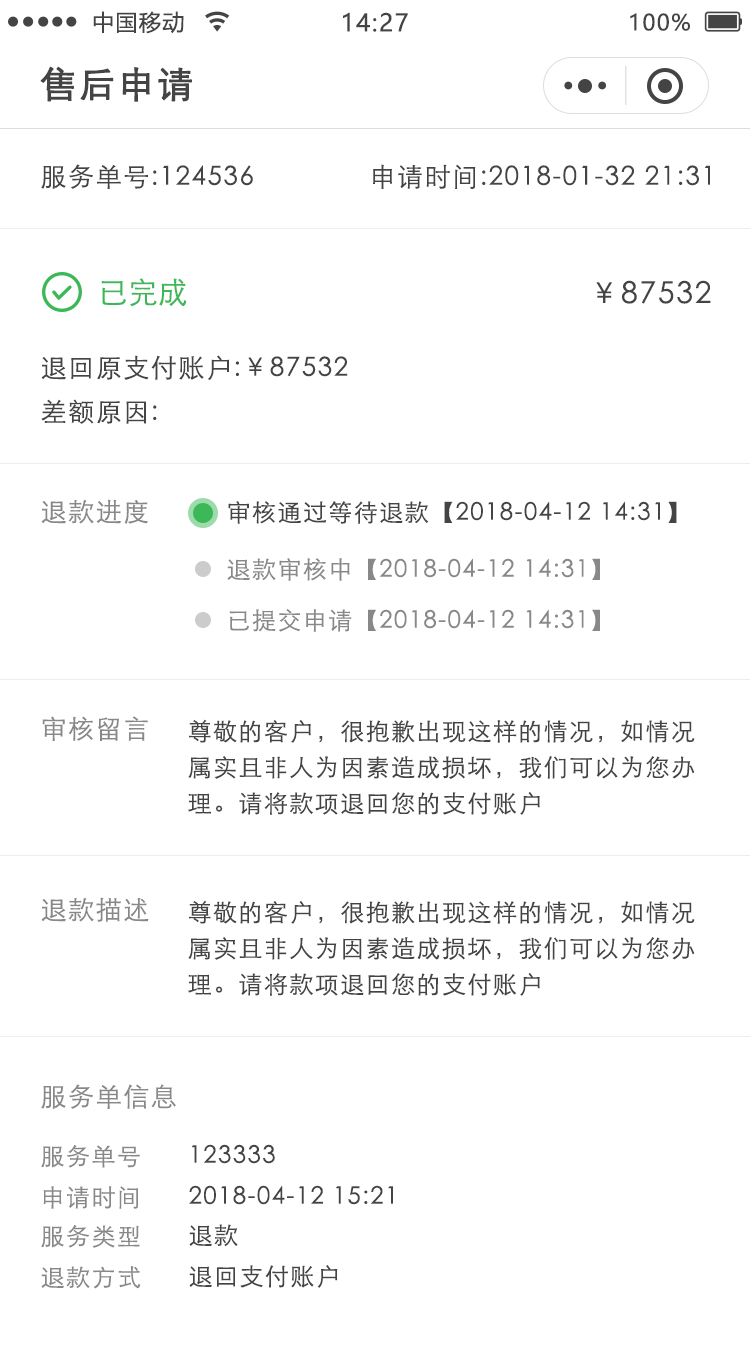
<style>
.page{position:relative;width:750px;height:1347px;background:#ffffff}
.page>*{position:absolute;margin:0}
.t1{font:22px "MicrosoftYaHei";letter-spacing:0.06em;color:#444444}
.t2{font:24px "MicrosoftYaHei";letter-spacing:0.06em;color:#444444}
.t3{font:36px "STXihei";letter-spacing:0.06em;color:#444444;font-weight:bold}
.t4{font:26px "STXihei";letter-spacing:0.06em;color:#444444}
.t5{font:30px "STXihei";color:#3db858}
.t6{font:30px "STXihei";letter-spacing:0.06em;color:#444444}
.t7{font:26px "STXihei";letter-spacing:0.06em;color:#888888}
.t8{font:24px "STXihei";letter-spacing:0.06em;color:#444444}
.t9{font:24px "STXihei";letter-spacing:0.06em;color:#888888}
.t10{font:24px/36px "STXihei";letter-spacing:0.06em;color:#444444}
</style>
<div class="page">
<p class="t1" style="left:93px;top:11px;width:91px;height:23px">中国移动</p>
<p class="t2" style="left:343px;top:12px;width:65px;height:20px">14:27</p>
<p class="t1" style="left:630px;top:13px;width:60px;height:18px">100%</p>
<p class="t3" style="left:40px;top:66px;width:152px;height:36px">售后申请</p>
<p class="t4" style="left:41px;top:164px;width:212px;height:25px">服务单号:124536</p>
<p class="t4" style="left:373px;top:164px;width:337px;height:25px">申请时间:2018-01-32 21:31</p>
<p class="t5" style="left:101px;top:278px;width:86px;height:29px">已完成</p>
<p class="t6" style="left:596px;top:280px;width:115px;height:24px">￥87532</p>
<p class="t4" style="left:41px;top:355px;width:307px;height:25px">退回原支付账户:￥87532</p>
<p class="t4" style="left:41px;top:399px;width:116px;height:25px">差额原因:</p>
<p class="t7" style="left:41px;top:499px;width:107px;height:25px">退款进度</p>
<p class="t8" style="left:228px;top:501px;width:449px;height:23px">审核通过等待退款【2018-04-12 14:31】</p>
<p class="t9" style="left:227px;top:558px;width:373px;height:23px">退款审核中【2018-04-12 14:31】</p>
<p class="t9" style="left:229px;top:609px;width:371px;height:23px">已提交申请【2018-04-12 14:31】</p>
<p class="t7" style="left:42px;top:716px;width:106px;height:25px">审核留言</p>
<p class="t10" style="left:188px;top:719px;width:507px;height:96px">尊敬的客户，很抱歉出现这样的情况，如情况<br>属实且非人为因素造成损坏，我们可以为您办<br>理。请将款项退回您的支付账户</p>
<p class="t7" style="left:41px;top:897px;width:108px;height:25px">退款描述</p>
<p class="t10" style="left:188px;top:900px;width:507px;height:96px">尊敬的客户，很抱歉出现这样的情况，如情况<br>属实且非人为因素造成损坏，我们可以为您办<br>理。请将款项退回您的支付账户</p>
<p class="t7" style="left:41px;top:1084px;width:135px;height:25px">服务单信息</p>
<p class="t9" style="left:41px;top:1145px;width:99px;height:23px">服务单号</p>
<p class="t8" style="left:191px;top:1144px;width:84px;height:20px">123333</p>
<p class="t9" style="left:43px;top:1186px;width:95px;height:23px">申请时间</p>
<p class="t8" style="left:189px;top:1185px;width:204px;height:20px">2018-04-12 15:21</p>
<p class="t9" style="left:41px;top:1225px;width:99px;height:23px">服务类型</p>
<p class="t8" style="left:189px;top:1224px;width:49px;height:22px">退款</p>
<p class="t8" style="left:189px;top:1265px;width:149px;height:23px">退回支付账户</p>
<p class="t9" style="left:41px;top:1266px;width:100px;height:23px">退款方式</p>
</div>
